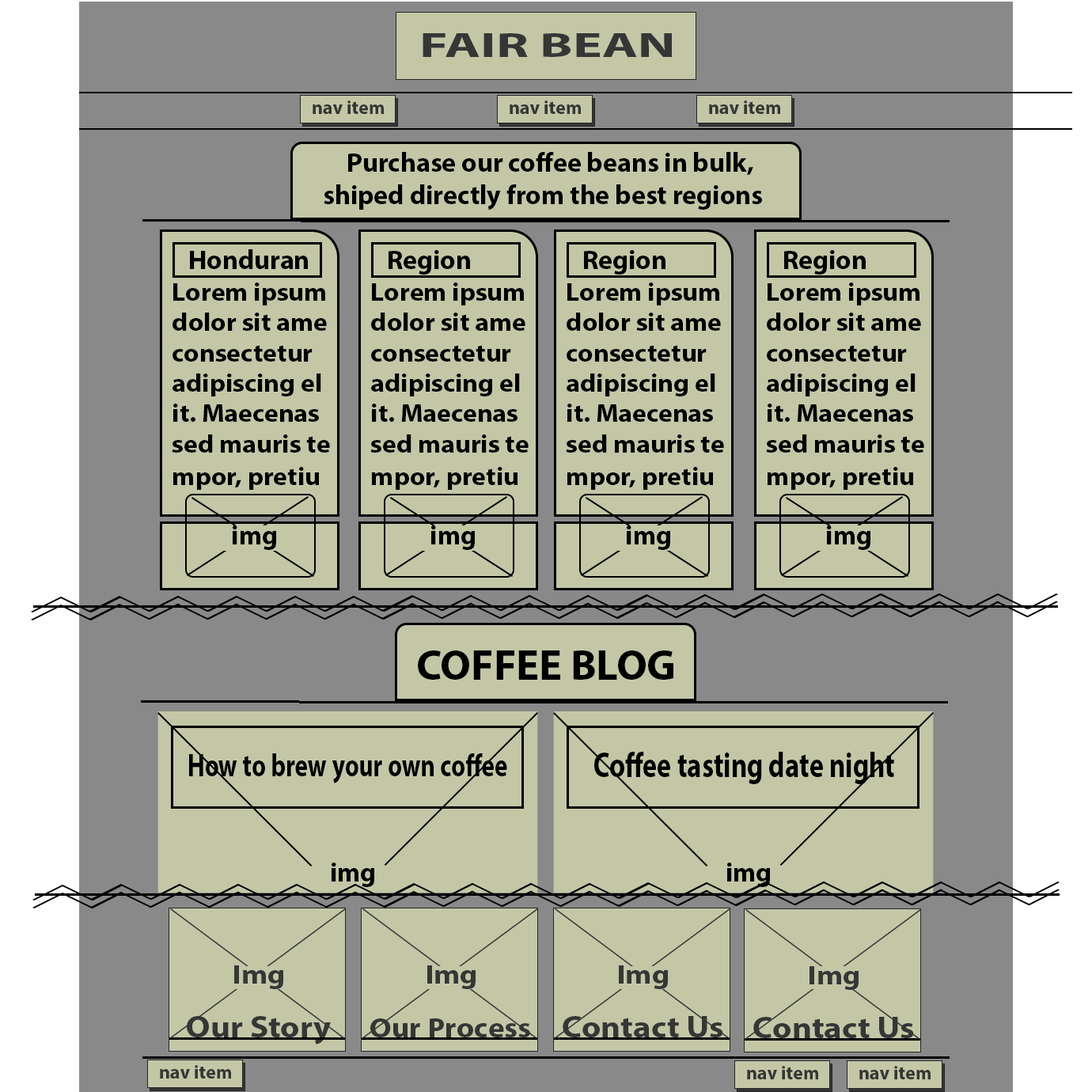
<style>
.page{position:relative;width:1092px;height:1092px;background:#c4c7a6}
.page>*{position:absolute;margin:0}
.t1{font:34.4px "MyriadPro-Bold";color:#363636;scale:1.59 1}
.t2{font:19px "MyriadPro-Bold";color:#363636}
.t3{font:26.9px "MyriadPro-Bold";color:#000000}
.t4{font:25.3px "MyriadPro-Bold";color:#000000;scale:1.06 1}
.t5{font:42.7px "MyriadPro-Bold";color:#000000}
.t6{font:32px "MyriadPro-Bold";color:#000000;scale:0.78 1}
.t7{font:35.4px "MyriadPro-Bold";color:#000000;scale:0.78 1}
.t8{font:26.8px "MyriadPro-Bold";color:#363636;scale:1.15 1}
.t9{font:30.8px "MyriadPro-Bold";color:#363636;scale:1.1 1}
.t10{font:28px "MyriadPro-Bold";color:#363636;scale:1.1 1}
</style>
<div class="page">
<p class="t1" style="left:423px;top:33px;width:249px;height:24px">FAIR BEAN</p>
<p class="t2" style="left:313px;top:100px;width:71px;height:14px">nav item</p>
<p class="t2" style="left:510px;top:100px;width:71px;height:14px">nav item</p>
<p class="t2" style="left:709px;top:100px;width:71px;height:14px">nav item</p>
<p class="t3" style="left:324px;top:152px;width:438px;height:58px">Purchase our coffee beans in bulk, shiped directly from the best regions</p>
<p class="t3" style="left:190px;top:249px;width:118px;height:20px">Honduran</p>
<p class="t3" style="left:389px;top:250px;width:81px;height:25px">Region</p>
<p class="t3" style="left:584px;top:250px;width:81px;height:25px">Region</p>
<p class="t3" style="left:784px;top:250px;width:82px;height:25px">Region</p>
<p class="t4" style="left:172px;top:282px;width:158px;height:208px">Lorem ipsum <br>dolor sit ame<br>consectetur <br>adipiscing el<br>it. Maecenas <br>sed mauris te<br>mpor, pretiu</p>
<p class="t4" style="left:370px;top:282px;width:159px;height:208px">Lorem ipsum <br>dolor sit ame<br>consectetur <br>adipiscing el<br>it. Maecenas <br>sed mauris te<br>mpor, pretiu</p>
<p class="t4" style="left:566px;top:282px;width:158px;height:208px">Lorem ipsum <br>dolor sit ame<br>consectetur <br>adipiscing el<br>it. Maecenas <br>sed mauris te<br>mpor, pretiu</p>
<p class="t4" style="left:766px;top:282px;width:158px;height:208px">Lorem ipsum <br>dolor sit ame<br>consectetur <br>adipiscing el<br>it. Maecenas <br>sed mauris te<br>mpor, pretiu</p>
<p class="t3" style="left:233px;top:525px;width:43px;height:25px">img</p>
<p class="t3" style="left:431px;top:525px;width:44px;height:25px">img</p>
<p class="t3" style="left:627px;top:525px;width:43px;height:25px">img</p>
<p class="t3" style="left:827px;top:525px;width:43px;height:25px">img</p>
<p class="t5" style="left:418px;top:650px;width:255px;height:30px">COFFEE BLOG</p>
<p class="t6" style="left:189px;top:753px;width:318px;height:30px">How to brew your own coffee</p>
<p class="t7" style="left:594px;top:752px;width:300px;height:32px">Coffee tasting date night</p>
<p class="t3" style="left:332px;top:863px;width:42px;height:24px">img</p>
<p class="t3" style="left:727px;top:863px;width:43px;height:24px">img</p>
<p class="t8" style="left:234px;top:965px;width:49px;height:24px">Img</p>
<p class="t8" style="left:427px;top:965px;width:49px;height:24px">Img</p>
<p class="t8" style="left:619px;top:965px;width:49px;height:24px">Img</p>
<p class="t8" style="left:809px;top:966px;width:50px;height:24px">Img</p>
<p class="t9" style="left:187px;top:1016px;width:144px;height:29px">Our Story</p>
<p class="t10" style="left:370px;top:1018px;width:160px;height:19px">Our Process</p>
<p class="t9" style="left:563px;top:1016px;width:160px;height:21px">Contact Us</p>
<p class="t9" style="left:753px;top:1017px;width:161px;height:21px">Contact Us</p>
<p class="t2" style="left:160px;top:1065px;width:71px;height:14px">nav item</p>
<p class="t2" style="left:747px;top:1066px;width:71px;height:13px">nav item</p>
<p class="t2" style="left:859px;top:1066px;width:72px;height:13px">nav item</p>
</div>
